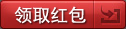
<style>
.page{position:relative;width:126px;height:29px}
.page>*{position:absolute;margin:0}
.t1{font:18px "SimHei";color:#fdfafa}
</style>
<div class="page">
<p class="t1" style="left:14px;top:6px;width:72px;height:18px">领取红包</p>
</div>
